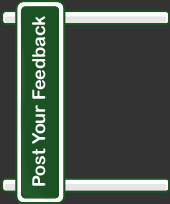
<style>
.page{position:relative;width:170px;height:204px;background:#333333}
.page>*{position:absolute;margin:0}
.t1{font:18px "ArialRoundedMTBold";color:#ffffff}
</style>
<div class="page">
<p class="t1" style="left:32px;top:16px;width:14px;height:170px;rotate:-90deg">Post Your Feedback</p>
</div>
